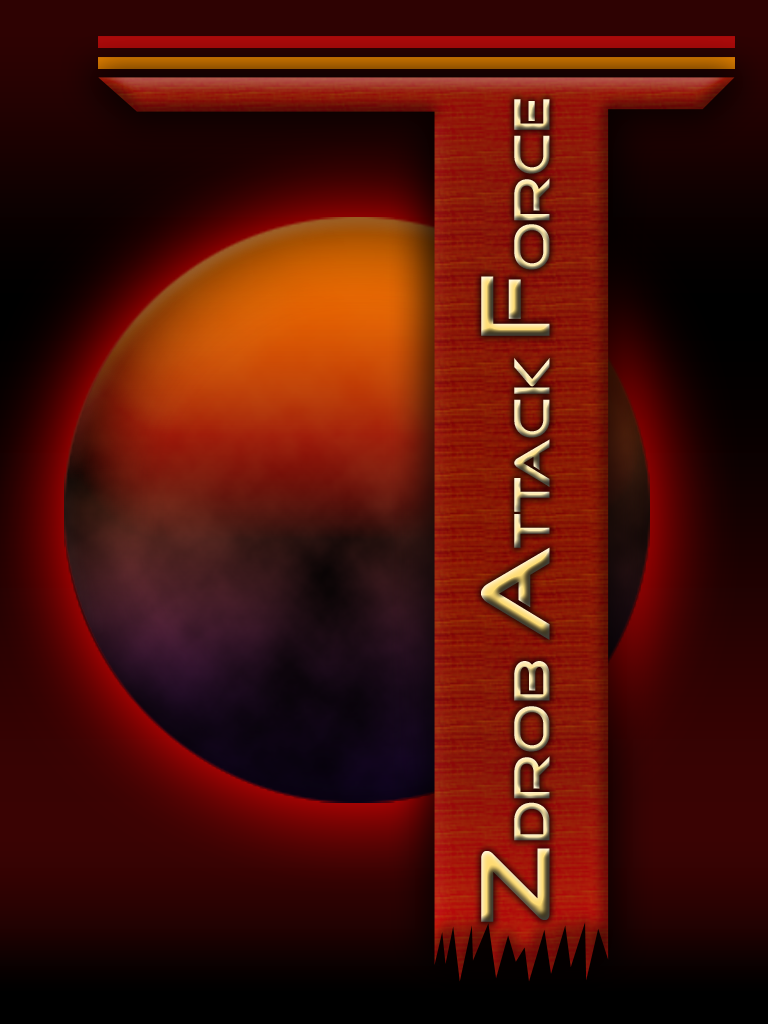
<style>
.page{position:relative;width:768px;height:1024px}
.page>*{position:absolute;margin:0}
.t1{font:51.5px "GoodTimes"}
.t2{font:100px "GoodTimes"}
</style>
<div class="page">
<p class="t1" style="left:481px;top:99px;width:69px;height:823px;rotate:-90deg"><span class="t2">Z</span>DROB <span class="t2">A</span>TTACK <span class="t2">F</span>ORCE</p>
</div>
